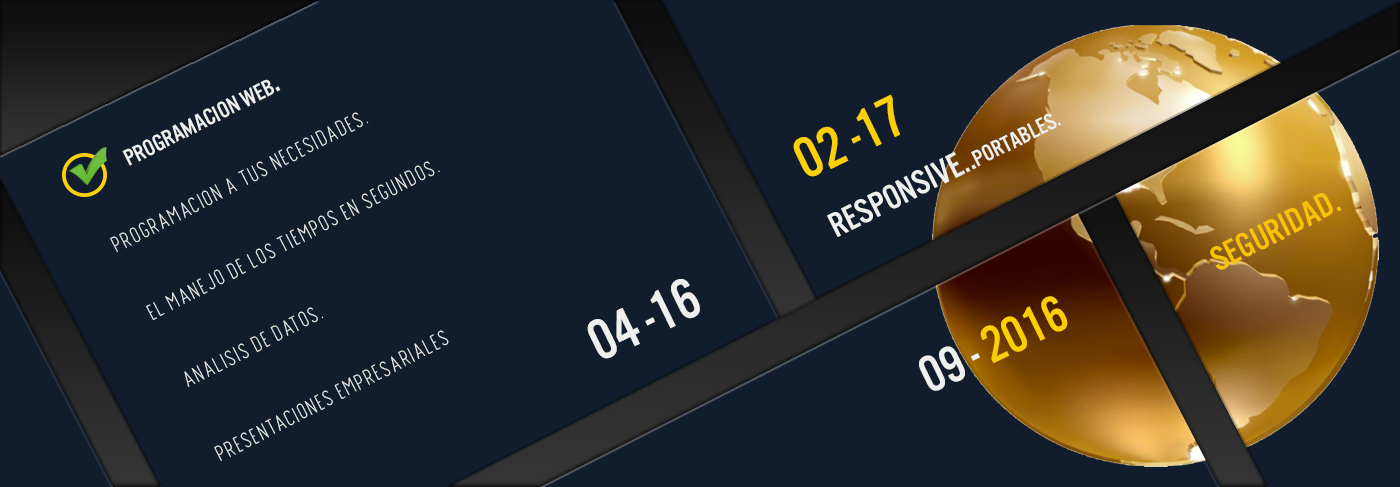
<style>
.page{position:relative;width:1400px;height:487px;background:#111c2c}
.page>*{position:absolute;margin:0}
.t1{font:24px "U.S.101";color:#efefed}
.t2{font:36px "U.S.101";color:#efefed}
.t3{font:60px "U.S.101";color:#fbd006}
.t4{font:30px "FinlandRounded-Thin";color:#efefed}
.t5{font:30.1px "FinlandRounded-Thin";color:#efefed}
.t6{font:36.1px "U.S.101";color:#f8c206}
.t7{font:60px "U.S.101";color:#efefed}
.t8{font:54px "U.S.101";color:#efefed}
.t9{font:54px "U.S.101";color:#facf06}
</style>
<div class="page">
<p class="t1" style="left:122px;top:79px;width:159px;height:87px;rotate:-27deg">Programacion WEB<span class="t2">.</span></p>
<p class="t3" style="left:793px;top:94px;width:108px;height:83px;rotate:-26deg">02 -17</p>
<p class="t4" style="left:110px;top:112px;width:259px;height:141px;rotate:-27deg">PROGRAMACION A TUS NECESIDADES.</p>
<p class="t2" style="left:827px;top:113px;width:234px;height:124px;rotate:-27deg">RESPONSIVE..<span class="t1">PORTABLES.</span></p>
<p class="t5" style="left:146px;top:161px;width:294px;height:159px;rotate:-27deg">EL MANEJO DE LOS TIEMPOS EN SEGUNDOS.</p>
<p class="t6" style="left:1210px;top:193px;width:132px;height:77px;rotate:-27deg">seguridad.</p>
<p class="t7" style="left:587px;top:279px;width:113px;height:80px;rotate:-26deg">04 -16</p>
<p class="t8" style="left:919px;top:296px;width:149px;height:95px;rotate:-26deg">09 - <span class="t9">2016</span></p>
<p class="t4" style="left:184px;top:307px;width:140px;height:80px;rotate:-27deg">ANALISIS DE DATOS.</p>
<p class="t4" style="left:214px;top:330px;width:235px;height:132px;rotate:-27deg">PRESENTACIONES EMPRESARIALES</p>
</div>
